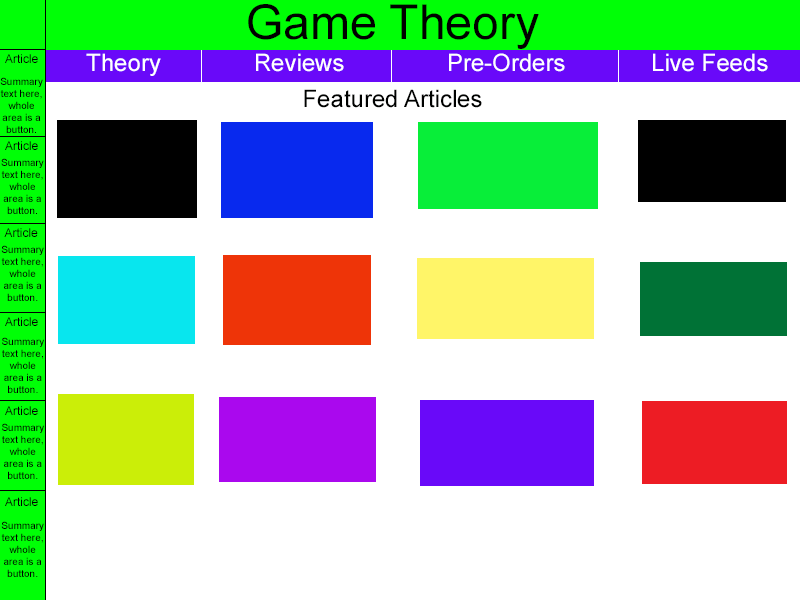
<style>
.page{position:relative;width:800px;height:600px;background:#ffffff}
.page>*{position:absolute;margin:0}
.t1{font:12px "ArialMT";color:#000000}
.t2{font:24px "ArialMT";color:#ffffff}
.t3{font:10px "ArialMT";color:#000000}
.t4{font:24px "ArialMT";color:#000100}
</style>
<div class="page">
<p class="t1" style="left:5px;top:54px;width:33px;height:9px">Article</p>
<p class="t2" style="left:86px;top:53px;width:75px;height:23px">Theory</p>
<p class="t2" style="left:256px;top:53px;width:88px;height:19px">Reviews</p>
<p class="t2" style="left:449px;top:53px;width:116px;height:19px">Pre-Orders</p>
<p class="t2" style="left:653px;top:53px;width:115px;height:19px">Live Feeds</p>
<p class="t3" style="left:0px;top:77px;width:43px;height:56px;text-align:center">Summary text here, whole area is a button.</p>
<p class="t4" style="left:304px;top:89px;width:178px;height:19px">Featured Articles</p>
<p class="t1" style="left:5px;top:141px;width:33px;height:9px">Article</p>
<p class="t3" style="left:1px;top:158px;width:43px;height:56px;text-align:center">Summary text here, whole area is a button.</p>
<p class="t1" style="left:4px;top:228px;width:34px;height:9px">Article</p>
<p class="t3" style="left:1px;top:245px;width:43px;height:56px;text-align:center">Summary text here, whole area is a button.</p>
<p class="t1" style="left:5px;top:317px;width:33px;height:9px">Article</p>
<p class="t3" style="left:2px;top:337px;width:42px;height:56px;text-align:center">Summary text here, whole area is a button.</p>
<p class="t1" style="left:5px;top:406px;width:33px;height:9px">Article</p>
<p class="t3" style="left:2px;top:423px;width:42px;height:56px;text-align:center">Summary text here, whole area is a button.</p>
<p class="t1" style="left:5px;top:497px;width:33px;height:9px">Article</p>
<p class="t3" style="left:1px;top:521px;width:43px;height:56px;text-align:center">Summary text here, whole area is a button.</p>
</div>
